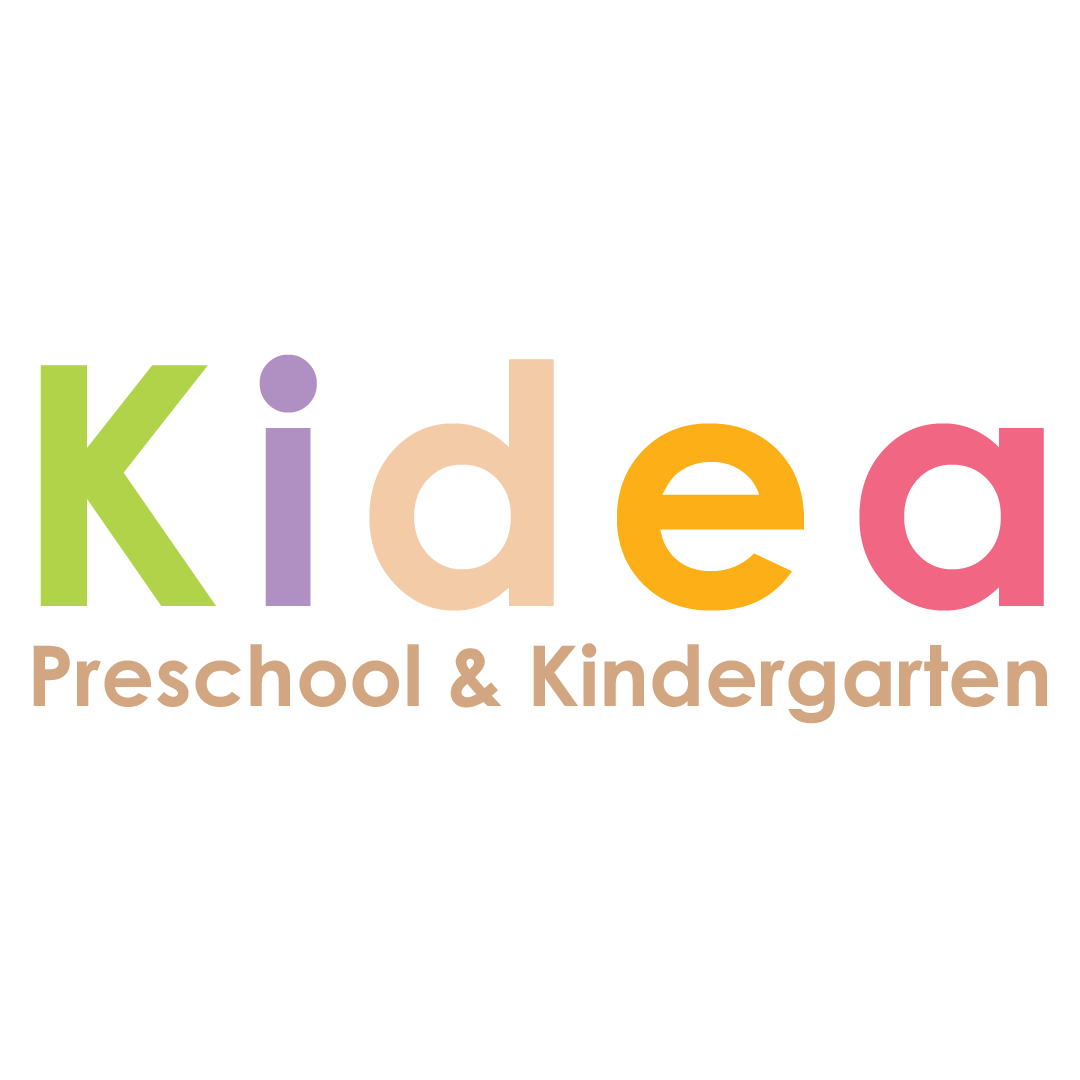
<style>
.page{position:relative;width:1080px;height:1080px;background:#ffffff}
.page>*{position:absolute;margin:0}
.t1{font:83.8px "CenturyGothic-Bold";color:#d2a680}
.t2{font:335.4px "CenturyGothic-Bold";letter-spacing:0.08em;color:#b1d349}
.t3{font:335.4px "CenturyGothic-Bold";letter-spacing:0.08em;color:#b090c3}
.t4{font:335.4px "CenturyGothic-Bold";letter-spacing:0.08em;color:#f4cba7}
.t5{font:335.4px "CenturyGothic-Bold";letter-spacing:0.08em;color:#fcaf17}
.t6{font:335.4px "CenturyGothic-Bold";letter-spacing:0.08em;color:#f16783}
</style>
<div class="page">
<p class="t1" style="left:33px;top:354px;width:1014px;height:370px;text-align:center"><span class="t2">K</span><span class="t3">i</span><span class="t4">d</span><span class="t5">e</span><span class="t6">a<br></span>Preschool &amp; Kindergarten</p>
</div>
